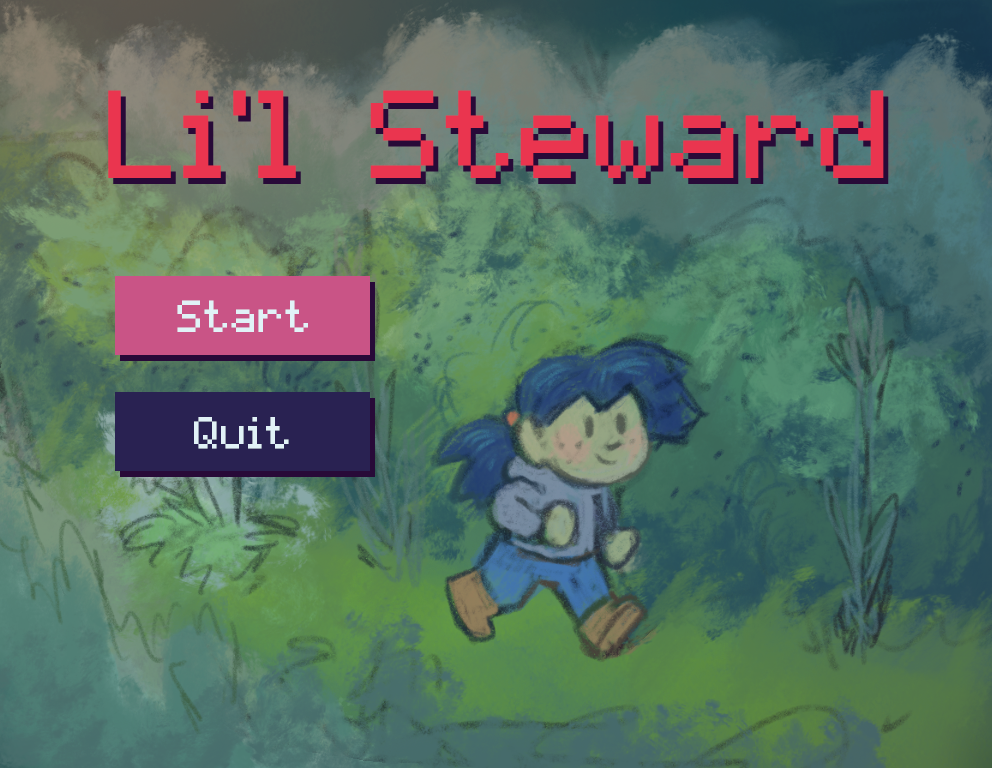
<style>
.page{position:relative;width:992px;height:768px}
.page>*{position:absolute;margin:0}
.t1{font:100px "pixelmix";color:#ea354f}
.t2{font:36px "pixelmix";color:#e1f2f7}
</style>
<div class="page">
<p class="t1" style="left:108px;top:90px;width:776px;height:88px">Li’l Steward</p>
<p class="t2" style="left:177px;top:300px;width:131px;height:32px">Start</p>
<p class="t2" style="left:194px;top:417px;width:95px;height:32px">Quit</p>
</div>
